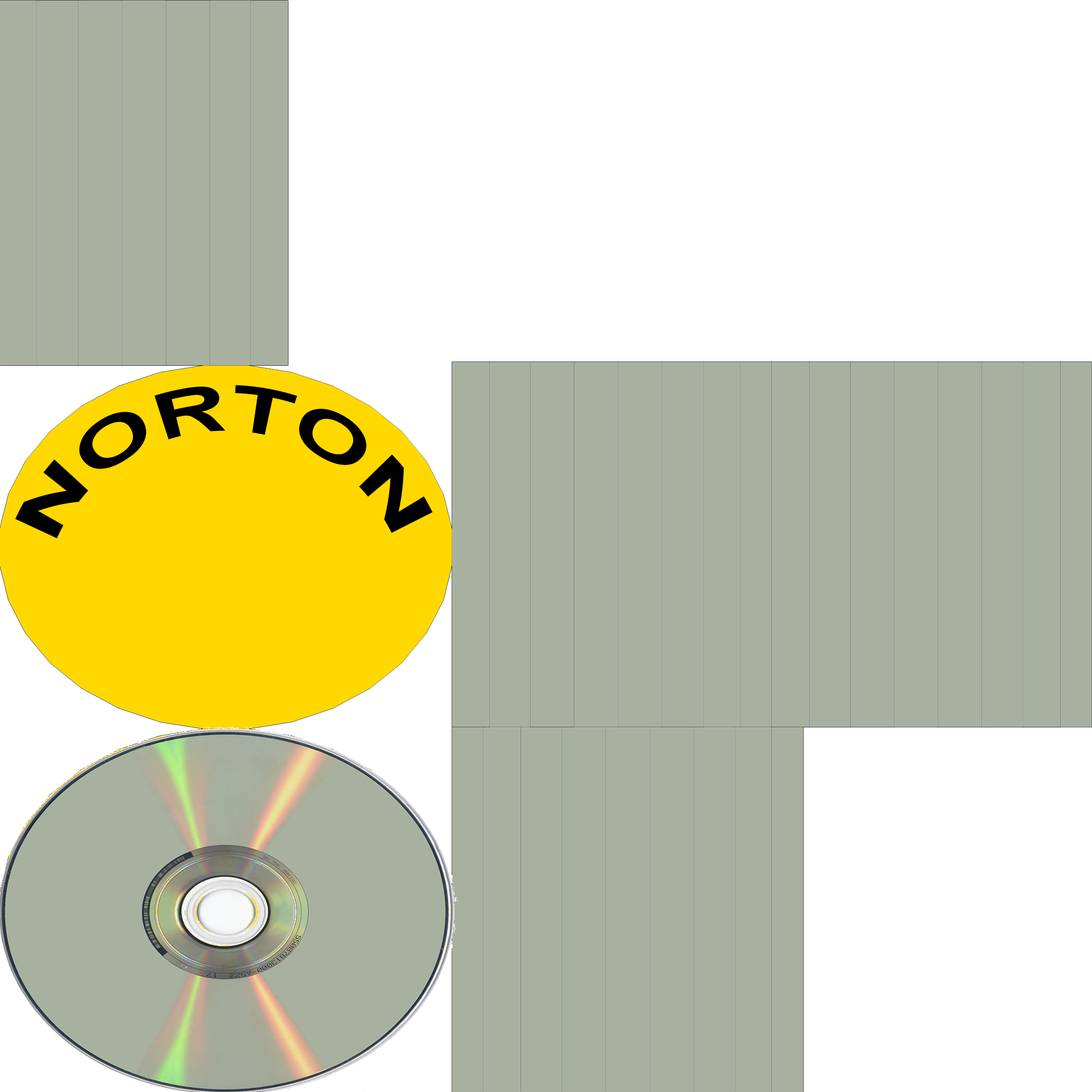
<style>
.page{position:relative;width:1092px;height:1092px;background:#a8b1a0}
.page>*{position:absolute;margin:0}
.t1{font:64px "Arial-BoldMT";letter-spacing:0.06em;color:#000000}
</style>
<div class="page">
<p class="t1" style="left:15px;top:385px;width:418px;height:154px">NORTON</p>
</div>
